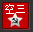
<style>
.page{position:relative;width:33px;height:32px;background:#c50000}
.page>*{position:absolute;margin:0}
.t1{font:10.8px "SimSun";color:#ffffff}
</style>
<div class="page">
<p class="t1" style="left:5px;top:4px;width:20px;height:10px">空三</p>
</div>
